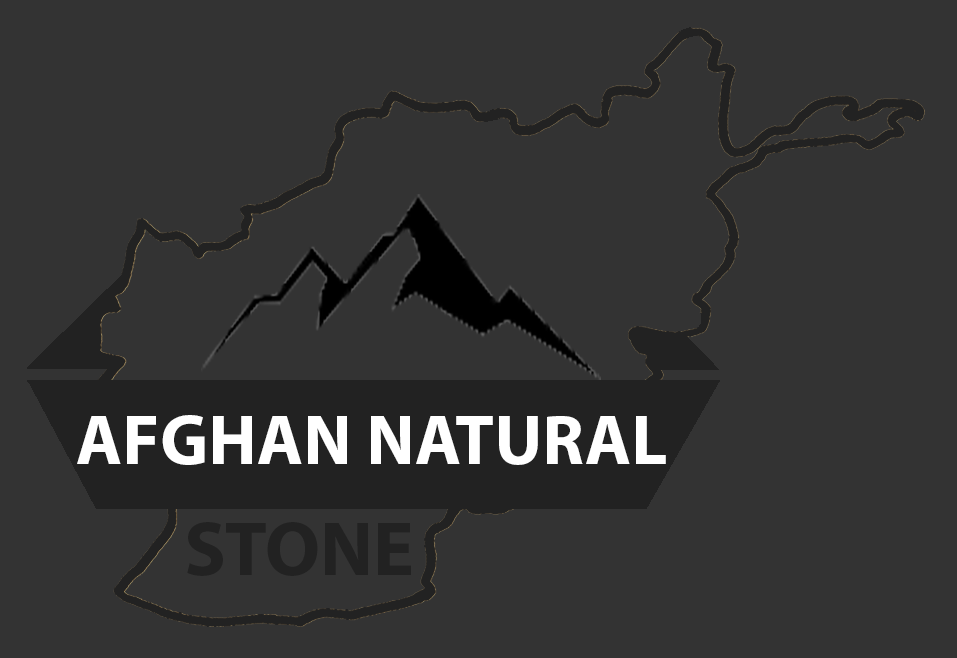
<style>
.page{position:relative;width:957px;height:658px;background:#333333}
.page>*{position:absolute;margin:0}
.t1{font:70.7px "MyriadPro-Bold";color:#ffffff}
.t2{font:76.9px "MyriadPro-Bold";color:#222222}
</style>
<div class="page">
<p class="t1" style="left:77px;top:415px;width:589px;height:50px">AFGHAN NATURAL</p>
<p class="t2" style="left:187px;top:522px;width:224px;height:54px">STONE</p>
</div>
